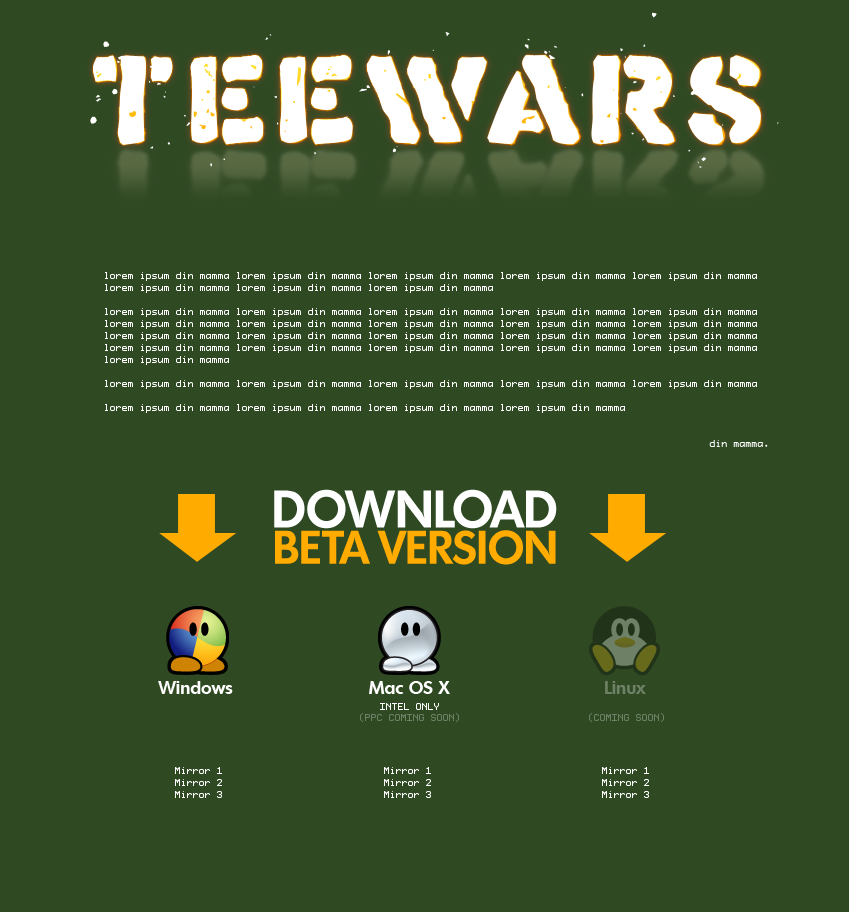
<style>
.page{position:relative;width:849px;height:912px;background:#2f4923}
.page>*{position:absolute;margin:0}
.t1{font:121.5px "KnowYourProduct";color:#ffffff}
.t2{font:12px/12px "ProFontWindows";color:#ffffff}
.t3{font:45.5px/36.3px "Montreal-DemiBold";color:#ffab00}
.t4{font:51.3px "Montreal-DemiBold";color:#ffffff}
.t5{font:18.3px "Montreal-DemiBold";color:#ffffff}
.t6{font:18.3px "Montreal-DemiBold";color:#6e8065}
.t7{font:12px "ProFontWindows";color:#6e8065;text-transform:uppercase}
.t8{font:12px "ProFontWindows";color:#ffffff;text-transform:uppercase}
</style>
<div class="page">
<p class="t1" style="left:93px;top:55px;width:668px;height:90px">Teewars</p>
<p class="t2" style="left:105px;top:272px;width:663px;height:175px">lorem ipsum din mamma lorem ipsum din mamma lorem ipsum din mamma lorem ipsum din mamma lorem ipsum din mamma lorem ipsum din mamma lorem ipsum din mamma lorem ipsum din mamma <br><br>lorem ipsum din mamma lorem ipsum din mamma lorem ipsum din mamma lorem ipsum din mamma lorem ipsum din mamma lorem ipsum din mamma lorem ipsum din mamma lorem ipsum din mamma lorem ipsum din mamma lorem ipsum din mamma lorem ipsum din mamma lorem ipsum din mamma lorem ipsum din mamma lorem ipsum din mamma lorem ipsum din mamma lorem ipsum din mamma lorem ipsum din mamma lorem ipsum din mamma lorem ipsum din mamma lorem ipsum din mamma lorem ipsum din mamma <br><br>lorem ipsum din mamma lorem ipsum din mamma lorem ipsum din mamma lorem ipsum din mamma lorem ipsum din mamma <br><br>lorem ipsum din mamma lorem ipsum din mamma lorem ipsum din mamma lorem ipsum din mamma <br><br><br>din mamma.</p>
<p class="t3" style="left:274px;top:489px;width:283px;height:76px;text-align:right"><span class="t4">DOWNLOAD<br></span>BETA VERSION</p>
<p class="t5" style="left:158px;top:681px;width:75px;height:13px">Windows</p>
<p class="t5" style="left:369px;top:681px;width:81px;height:13px">Mac OS X</p>
<p class="t6" style="left:605px;top:681px;width:41px;height:13px">Linux</p>
<p class="t7" style="left:360px;top:712px;width:99px;height:11px">(PPC coming soon)</p>
<p class="t8" style="left:380px;top:703px;width:59px;height:7px">Intel only</p>
<p class="t7" style="left:589px;top:712px;width:75px;height:11px">(Coming soon)</p>
<p class="t2" style="left:175px;top:767px;width:47px;height:31px">Mirror 1<br>Mirror 2<br>Mirror 3</p>
<p class="t2" style="left:384px;top:767px;width:47px;height:31px">Mirror 1<br>Mirror 2<br>Mirror 3</p>
<p class="t2" style="left:602px;top:767px;width:47px;height:31px">Mirror 1<br>Mirror 2<br>Mirror 3</p>
</div>
